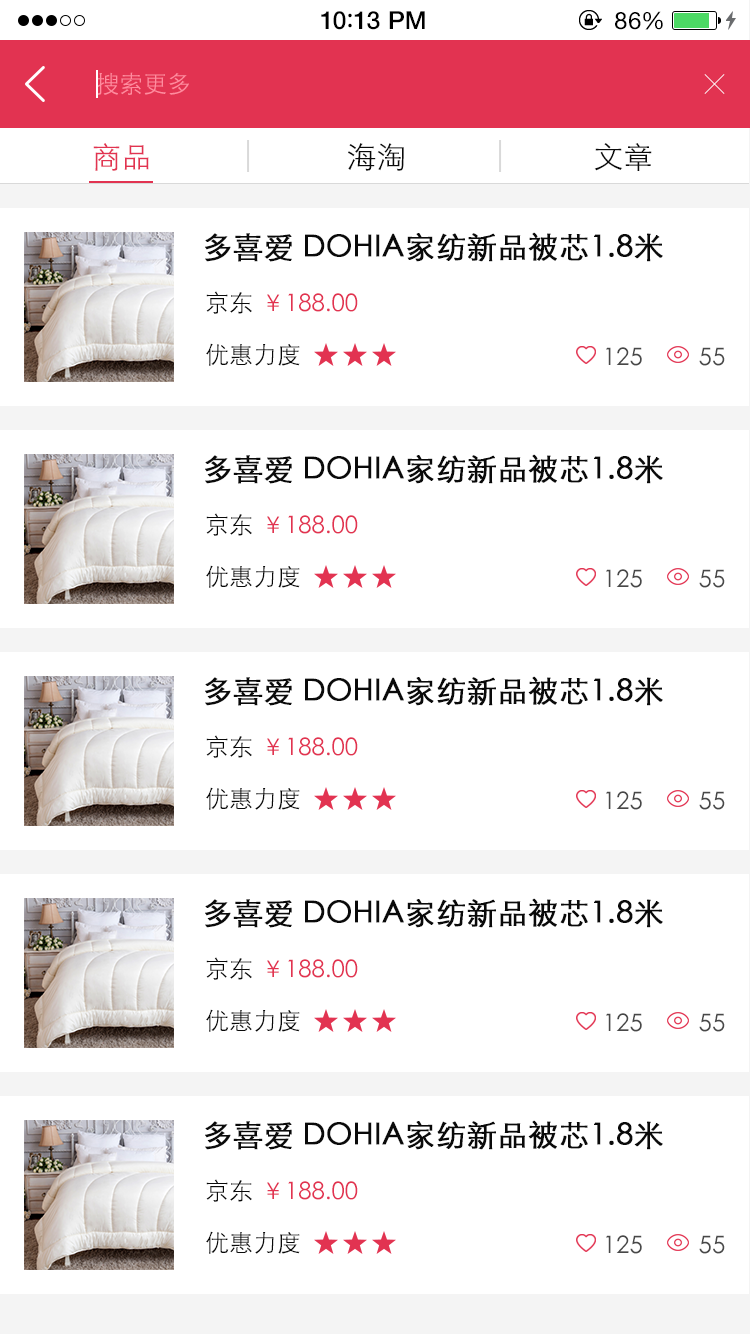
<style>
.page{position:relative;width:750px;height:1334px;background:#ffffff}
.page>*{position:absolute;margin:0}
.t1{font:25px "HelveticaNeue-Medium";letter-spacing:0.015em;color:#000000}
.t2{font:25px "ArialRoundedMTBold";letter-spacing:0.015em;color:#000000}
.t3{font:24px "HelveticaNeue";letter-spacing:0.03em;color:#000000}
.t4{font:24px "STXihei";color:#ff8c9f}
.t5{font:30px "STXihei";color:#e23351}
.t6{font:30px "STXihei";color:#0a0a0a}
.t7{font:30px "STXihei";color:#0a0a0a;font-weight:bold}
.t8{font:24px "STXihei";color:#0a0a0a}
.t9{font:24px "STXihei";color:#e23351}
.t10{font:24px "STXihei";color:#484848}
</style>
<div class="page">
<p class="t1" style="left:321px;top:11px;width:104px;height:19px">10<span class="t2">:</span>13 PM</p>
<p class="t3" style="left:615px;top:11px;width:48px;height:19px">86%</p>
<p class="t4" style="left:96px;top:72px;width:93px;height:23px">搜索更多</p>
<p class="t5" style="left:93px;top:143px;width:56px;height:28px">商品</p>
<p class="t6" style="left:348px;top:143px;width:56px;height:28px">海淘</p>
<p class="t6" style="left:594px;top:143px;width:58px;height:28px">文章</p>
<p class="t7" style="left:205px;top:232px;width:458px;height:30px">多喜爱 DOHIA家纺新品被芯1.8米</p>
<p class="t8" style="left:206px;top:291px;width:46px;height:23px">京东</p>
<p class="t9" style="left:267px;top:293px;width:91px;height:19px">￥188.00</p>
<p class="t8" style="left:206px;top:343px;width:94px;height:23px">优惠力度</p>
<p class="t10" style="left:606px;top:347px;width:36px;height:19px">125</p>
<p class="t10" style="left:699px;top:347px;width:26px;height:19px">55</p>
<p class="t7" style="left:205px;top:454px;width:458px;height:30px">多喜爱 DOHIA家纺新品被芯1.8米</p>
<p class="t8" style="left:206px;top:513px;width:46px;height:23px">京东</p>
<p class="t9" style="left:267px;top:515px;width:91px;height:19px">￥188.00</p>
<p class="t8" style="left:206px;top:565px;width:94px;height:23px">优惠力度</p>
<p class="t10" style="left:606px;top:569px;width:36px;height:19px">125</p>
<p class="t10" style="left:699px;top:569px;width:26px;height:19px">55</p>
<p class="t7" style="left:205px;top:676px;width:458px;height:30px">多喜爱 DOHIA家纺新品被芯1.8米</p>
<p class="t8" style="left:206px;top:735px;width:46px;height:23px">京东</p>
<p class="t9" style="left:267px;top:737px;width:91px;height:19px">￥188.00</p>
<p class="t8" style="left:206px;top:787px;width:94px;height:23px">优惠力度</p>
<p class="t10" style="left:606px;top:791px;width:36px;height:19px">125</p>
<p class="t10" style="left:699px;top:791px;width:26px;height:19px">55</p>
<p class="t7" style="left:205px;top:898px;width:458px;height:30px">多喜爱 DOHIA家纺新品被芯1.8米</p>
<p class="t8" style="left:206px;top:957px;width:46px;height:23px">京东</p>
<p class="t9" style="left:267px;top:959px;width:91px;height:19px">￥188.00</p>
<p class="t8" style="left:206px;top:1009px;width:94px;height:23px">优惠力度</p>
<p class="t10" style="left:606px;top:1013px;width:36px;height:19px">125</p>
<p class="t10" style="left:699px;top:1013px;width:26px;height:19px">55</p>
<p class="t7" style="left:205px;top:1120px;width:458px;height:30px">多喜爱 DOHIA家纺新品被芯1.8米</p>
<p class="t8" style="left:206px;top:1179px;width:46px;height:23px">京东</p>
<p class="t9" style="left:267px;top:1181px;width:91px;height:19px">￥188.00</p>
<p class="t8" style="left:206px;top:1231px;width:94px;height:23px">优惠力度</p>
<p class="t10" style="left:606px;top:1235px;width:36px;height:19px">125</p>
<p class="t10" style="left:699px;top:1235px;width:26px;height:19px">55</p>
</div>
